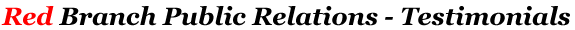
<style>
.page{position:relative;width:575px;height:30px;background:#ffffff}
.page>*{position:absolute;margin:0}
.t1{font:25px "Georgia-BoldItalic";color:#000000}
.t2{font:25px "Georgia-BoldItalic";color:#ff0000}
</style>
<div class="page">
<p class="t1" style="left:1px;top:6px;width:569px;height:20px"><span class="t2">Red</span> Branch Public Relations - Testimonials</p>
</div>
